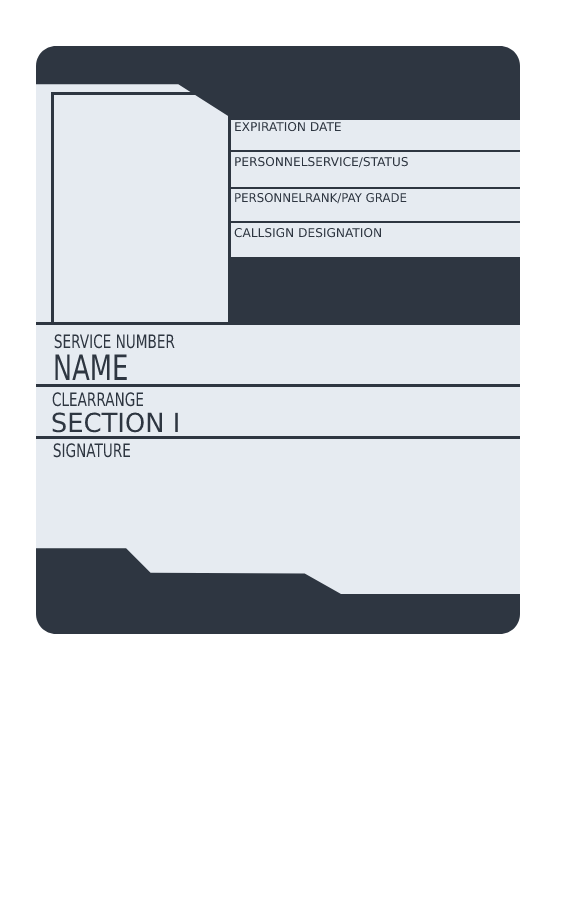
<style>
.page{position:relative;width:564px;height:902px;background:#ffffff}
.page>*{position:absolute;margin:0}
.t1{font:12.2px "DejaVuSans";color:#2e3641}
.t2{font:12.2px "DejaVuSans";color:#2e3641;scale:0.97 1}
.t3{font:18.5px "DejaVuSans";color:#2e3641;scale:0.74 1}
.t4{font:35px "DejaVuSans";color:#2e3641;scale:0.74 1}
.t5{font:26.3px "DejaVuSans";color:#2e3641}
</style>
<div class="page">
<p class="t1" style="left:235px;top:121px;width:106px;height:11px">EXPIRATION DATE</p>
<p class="t1" style="left:235px;top:156px;width:173px;height:12px">PERSONNELSERVICE/STATUS</p>
<p class="t2" style="left:235px;top:192px;width:172px;height:12px">PERSONNELRANK/PAY GRADE</p>
<p class="t1" style="left:234px;top:227px;width:147px;height:11px">CALLSIGN DESIGNATION</p>
<p class="t3" style="left:54px;top:334px;width:121px;height:15px">SERVICE NUMBER</p>
<p class="t4" style="left:55px;top:354px;width:72px;height:27px">NAME</p>
<p class="t3" style="left:52px;top:392px;width:92px;height:15px">CLEARRANGE</p>
<p class="t5" style="left:52px;top:412px;width:126px;height:21px">SECTION I</p>
<p class="t3" style="left:53px;top:443px;width:77px;height:15px">SIGNATURE</p>
</div>
